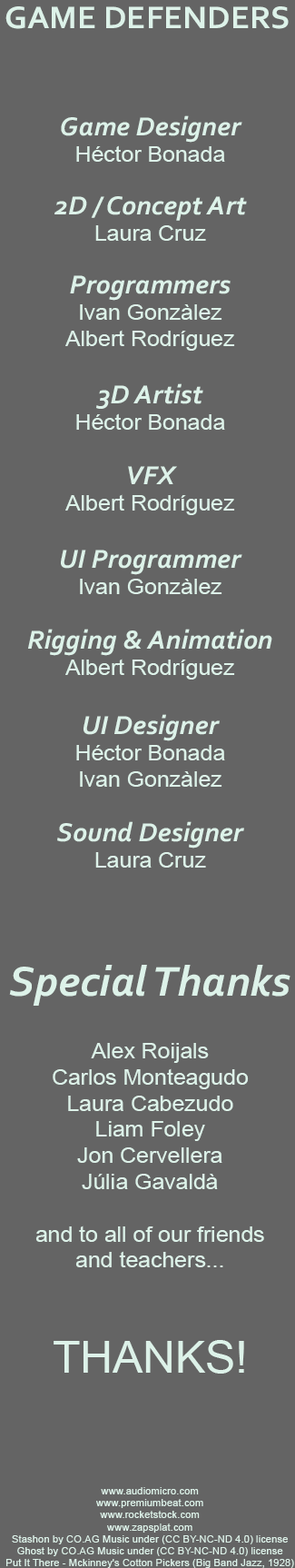
<style>
.page{position:relative;width:295px;height:1568px;background:#646464}
.page>*{position:absolute;margin:0}
.t1{font:32.7px "Corbel-Bold";color:#ddf2e9;scale:1.04 1}
.t2{font:27.3px "Corbel-BoldItalic";color:#ddf2e9;scale:1.04 1}
.t3{font:21.8px "ArialMT";color:#ddf2e9;scale:1.04 1}
.t4{font:43.6px "Corbel-BoldItalic";color:#ddf2e9;scale:1.04 1}
.t5{font:43.6px "ArialMT";color:#ddf2e9;scale:1.04 1}
.t6{font:10px "ArialMT";color:#ddf2e9;scale:1.04 1}
</style>
<div class="page">
<p class="t1" style="left:5px;top:6px;width:284px;height:23px">GAME DEFENDERS</p>
<p class="t2" style="left:61px;top:115px;width:182px;height:47px;text-align:center">Game Designer<br><span class="t3">Héctor Bonada</span></p>
<p class="t2" style="left:55px;top:196px;width:192px;height:45px;text-align:center">2D / Concept Art<br><span class="t3">Laura Cruz</span></p>
<p class="t3" style="left:65px;top:275px;width:170px;height:76px;text-align:center"><span class="t2">Programmers<br></span>Ivan Gonzàlez<br>Albert Rodríguez</p>
<p class="t3" style="left:76px;top:383px;width:149px;height:47px;text-align:center"><span class="t2">3D Artist<br></span>Héctor Bonada</p>
<p class="t3" style="left:65px;top:466px;width:170px;height:49px;text-align:center"><span class="t2">VFX<br></span>Albert Rodríguez</p>
<p class="t2" style="left:61px;top:550px;width:182px;height:44px;text-align:center">UI Programmer<br><span class="t3">Ivan Gonzàlez</span></p>
<p class="t2" style="left:28px;top:629px;width:245px;height:51px;text-align:center">Rigging &amp; Animation<br><span class="t3">Albert Rodríguez</span></p>
<p class="t3" style="left:76px;top:714px;width:149px;height:73px;text-align:center"><span class="t2">UI Designer<br></span>Héctor Bonada<br>Ivan Gonzàlez</p>
<p class="t2" style="left:57px;top:821px;width:187px;height:47px;text-align:center">Sound Designer<br><span class="t3">Laura Cruz</span></p>
<p class="t4" style="left:9px;top:965px;width:282px;height:41px">Special Thanks</p>
<p class="t3" style="left:35px;top:1043px;width:229px;height:331px;text-align:center">Alex Roijals<br>Carlos Monteagudo<br>Laura Cabezudo<br>Liam Foley<br>Jon Cervellera<br>Júlia Gavaldà<br><br>and to all of our friends<br>and teachers...<br><br><br><span class="t5">THANKS!</span></p>
<p class="t6" style="left:6px;top:1487px;width:288px;height:81px;text-align:center">www.audiomicro.com<br>www.premiumbeat.com<br>www.rocketstock.com<br>www.zapsplat.com<br>Stashon by CO.AG Music under (CC BY-NC-ND 4.0) license<br>Ghost by CO.AG Music under (CC BY-NC-ND 4.0) license<br>Put It There - Mckinney's Cotton Pickers (Big Band Jazz, 1928)</p>
</div>
